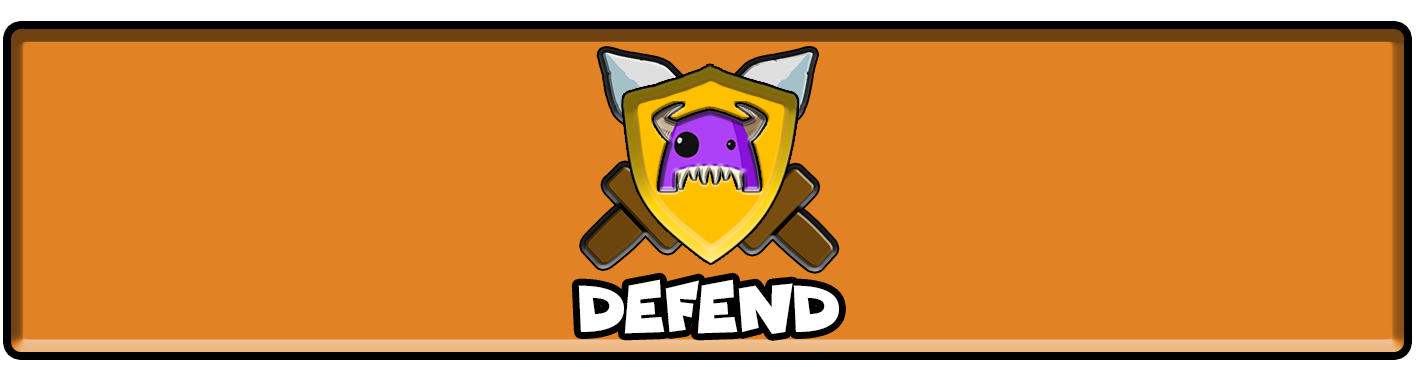
<style>
.page{position:relative;width:1421px;height:367px;background:#e18225}
.page>*{position:absolute;margin:0}
.t1{font:67.6px "Funhouse";color:#ffffff}
</style>
<div class="page">
<p class="t1" style="left:578px;top:279px;width:261px;height:55px">DEFEND</p>
</div>
